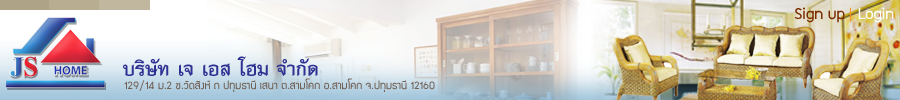
<style>
.page{position:relative;width:900px;height:100px}
.page>*{position:absolute;margin:0}
.t1{font:18px "supermarket";color:#7b2e00}
.t2{font:14px "supermarket";color:#f7941d}
.t3{font:18px "supermarket";color:#ffffff}
.t4{font:28px "PSLMethinee";color:#2e3192}
.t5{font:12px "supermarket";color:#736357}
</style>
<div class="page">
<p class="t1" style="left:794px;top:7px;width:51px;height:16px">Sign up</p>
<p class="t2" style="left:850px;top:7px;width:1px;height:14px">|</p>
<p class="t3" style="left:858px;top:7px;width:36px;height:16px">Login</p>
<p class="t4" style="left:123px;top:56px;width:195px;height:20px">บริษัท เจ เอส โฮม จำกัด</p>
<p class="t5" style="left:124px;top:78px;width:311px;height:14px">129/14 ม.2 ซ.วัดสิงห์ ถ ปทุมธานี เสนา ต.สามโคก อ.สามโคก จ.ปทุมธานี 12160</p>
</div>
